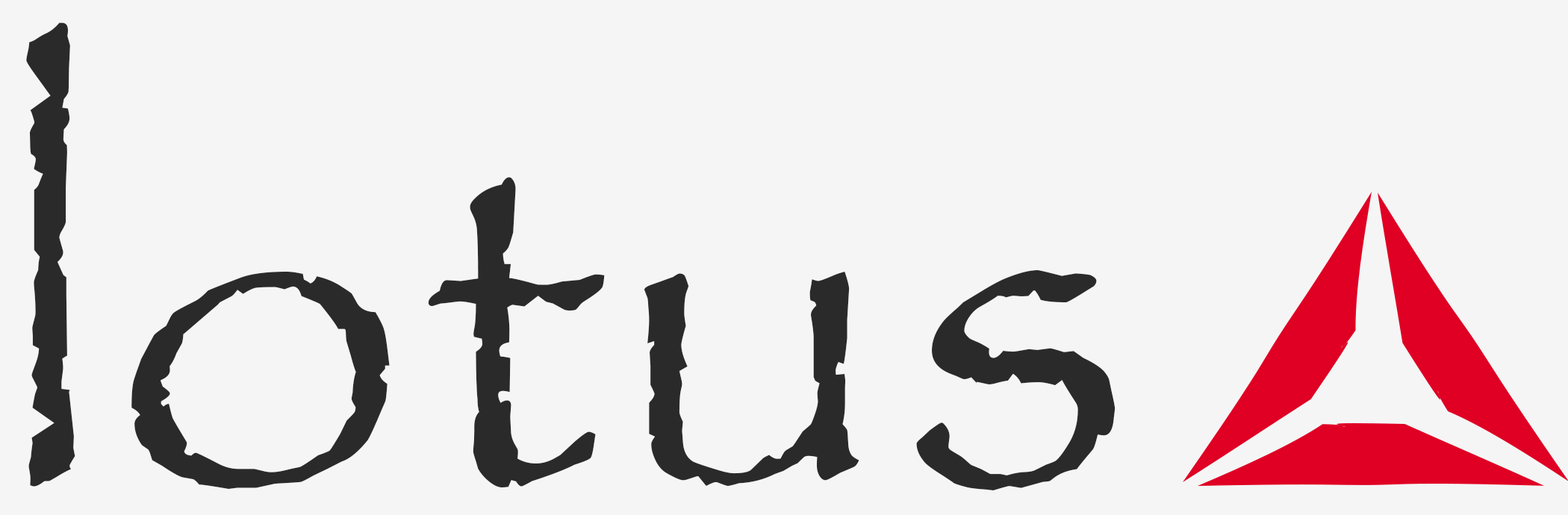
<style>
.page{position:relative;width:1568px;height:515px;background:#f5f5f5}
.page>*{position:absolute;margin:0}
.t1{font:559.5px "Papyrus-Regular";color:#2b2a2a}
</style>
<div class="page">
<p class="t1" style="left:26px;top:22px;width:1090px;height:469px">lotus</p>
</div>
